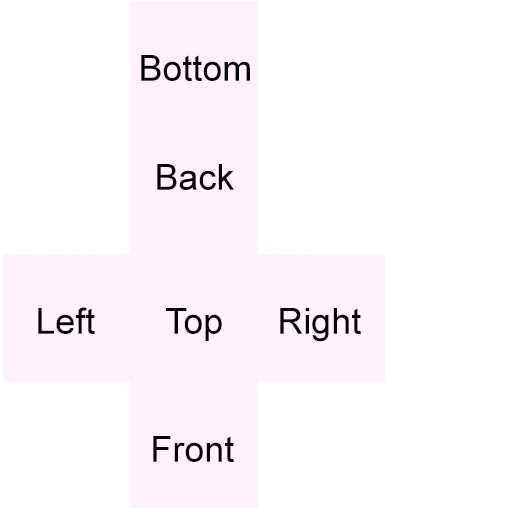
<style>
.page{position:relative;width:512px;height:512px;background:#ffffff}
.page>*{position:absolute;margin:0}
.t1{font:36px "ArialMT";color:#000000}
</style>
<div class="page">
<p class="t1" style="left:141px;top:55px;width:109px;height:26px">Bottom</p>
<p class="t1" style="left:157px;top:164px;width:77px;height:26px">Back</p>
<p class="t1" style="left:38px;top:307px;width:57px;height:27px">Left</p>
<p class="t1" style="left:166px;top:308px;width:56px;height:33px">Top</p>
<p class="t1" style="left:280px;top:308px;width:81px;height:34px">Right</p>
<p class="t1" style="left:153px;top:436px;width:81px;height:26px">Front</p>
</div>
